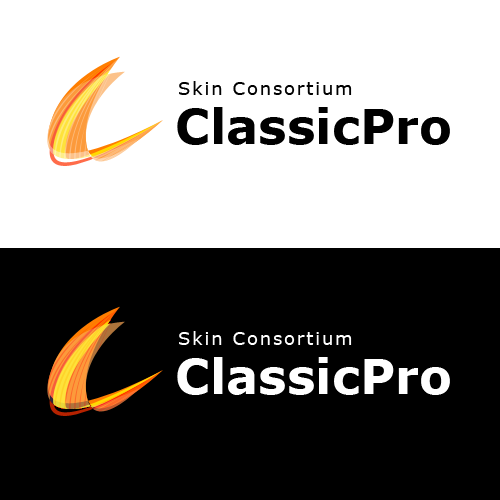
<style>
.page{position:relative;width:500px;height:500px;background:#ffffff}
.page>*{position:absolute;margin:0}
.t1{font:18px "Verdana";letter-spacing:0.1em;color:#010101}
.t2{font:48px "Verdana-Bold";color:#000000}
.t3{font:18px "Verdana";letter-spacing:0.1em;color:#ffffff}
.t4{font:48px "Verdana-Bold";color:#ffffff}
</style>
<div class="page">
<p class="t1" style="left:179px;top:81px;width:173px;height:14px">Skin Consortium</p>
<p class="t2" style="left:177px;top:107px;width:273px;height:38px">ClassicPro</p>
<p class="t3" style="left:179px;top:331px;width:173px;height:14px">Skin Consortium</p>
<p class="t4" style="left:177px;top:357px;width:273px;height:38px">ClassicPro</p>
</div>
